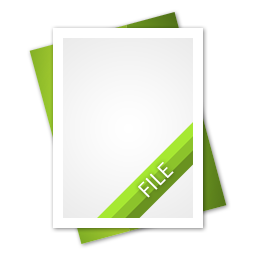
<style>
.page{position:relative;width:256px;height:256px;background:#ffffff}
.page>*{position:absolute;margin:0}
.t1{font:24px "Calibri";color:#ffffff;text-transform:uppercase}
</style>
<div class="page">
<p class="t1" style="left:138px;top:161px;width:36px;height:37px;rotate:-45deg">file</p>
</div>
